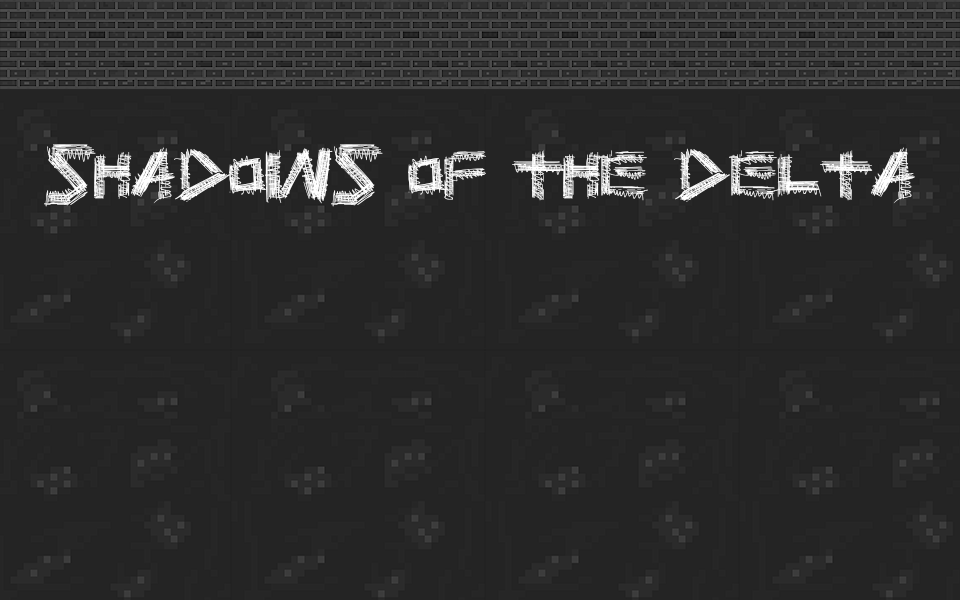
<style>
.page{position:relative;width:960px;height:600px;background:#242424}
.page>*{position:absolute;margin:0}
.t1{font:164px "PrisonBreak";color:#ffffff}
</style>
<div class="page">
<p class="t1" style="left:44px;top:144px;width:871px;height:63px">Shadows of the Delta</p>
</div>
